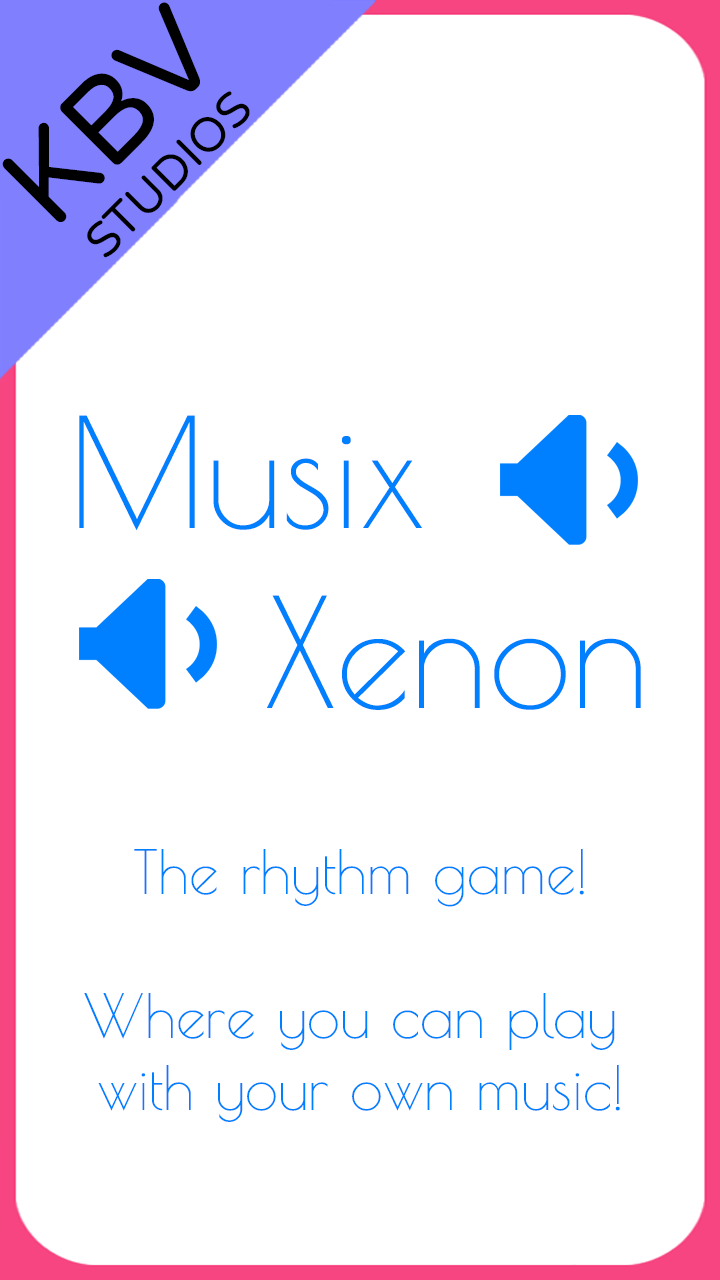
<style>
.page{position:relative;width:720px;height:1280px;background:#ffffff}
.page>*{position:absolute;margin:0}
.t1{font:48px "VarelaRound";color:#000000}
.t2{font:120px "VarelaRound";color:#000000}
.t3{font:150px "PoiretOne-Regular";color:#0080ff}
.t4{font:60px "PoiretOne-Regular";color:#0080ff}
</style>
<div class="page">
<p class="t1" style="left:2px;top:2px;width:248px;height:256px;text-align:center;rotate:-45deg"><span class="t2">KBV<br></span>STUDIOS</p>
<p class="t3" style="left:79px;top:415px;width:562px;height:295px;text-align:center">Musix<br>        Xenon</p>
<p class="t4" style="left:84px;top:849px;width:536px;height:273px;text-align:center">The rhythm game!<br> <br>Where you can play <br>with your own music!</p>
</div>
